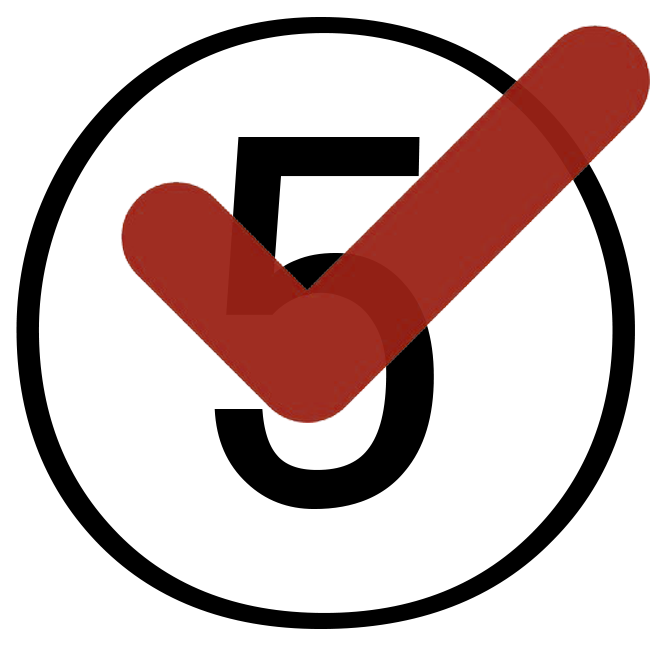
<style>
.page{position:relative;width:650px;height:650px;background:#ffffff}
.page>*{position:absolute;margin:0}
.t1{font:731.6px "Dotum";color:#000000}
</style>
<div class="page">
<p class="t1" style="left:16px;top:17px;width:619px;height:612px">⑤</p>
</div>
